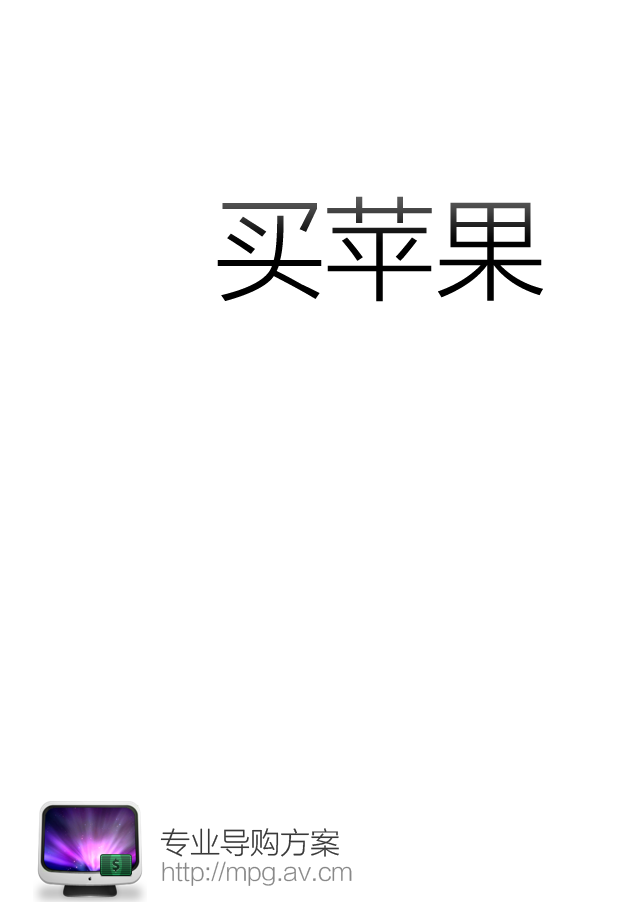
<style>
.page{position:relative;width:640px;height:920px;background:#ffffff}
.page>*{position:absolute;margin:0}
.t1{font:110.6px "FZLTXHK--GBK1-0";color:#000000}
.t2{font:30px "FZLTXHK--GBK1-0";color:#393939}
.t3{font:24px "FZLTXHK--GBK1-0";color:#878787}
</style>
<div class="page">
<p class="t1" style="left:217px;top:196px;width:326px;height:106px">买苹果</p>
<p class="t2" style="left:160px;top:828px;width:179px;height:29px">专业导购方案</p>
<p class="t3" style="left:162px;top:861px;width:190px;height:25px">http://mpg.av.cm</p>
</div>
